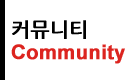
<style>
.page{position:relative;width:130px;height:80px;background:#ffffff}
.page>*{position:absolute;margin:0}
.t1{font:20px/24px "Arial-BoldMT";color:#dc241f;font-weight:bold}
.t2{font:20px/24px "NanumGothicBold";color:#000000;font-weight:bold}
</style>
<div class="page">
<p class="t1" style="left:11px;top:20px;width:114px;height:44px"><span class="t2">커뮤니티<br></span>Community</p>
</div>
